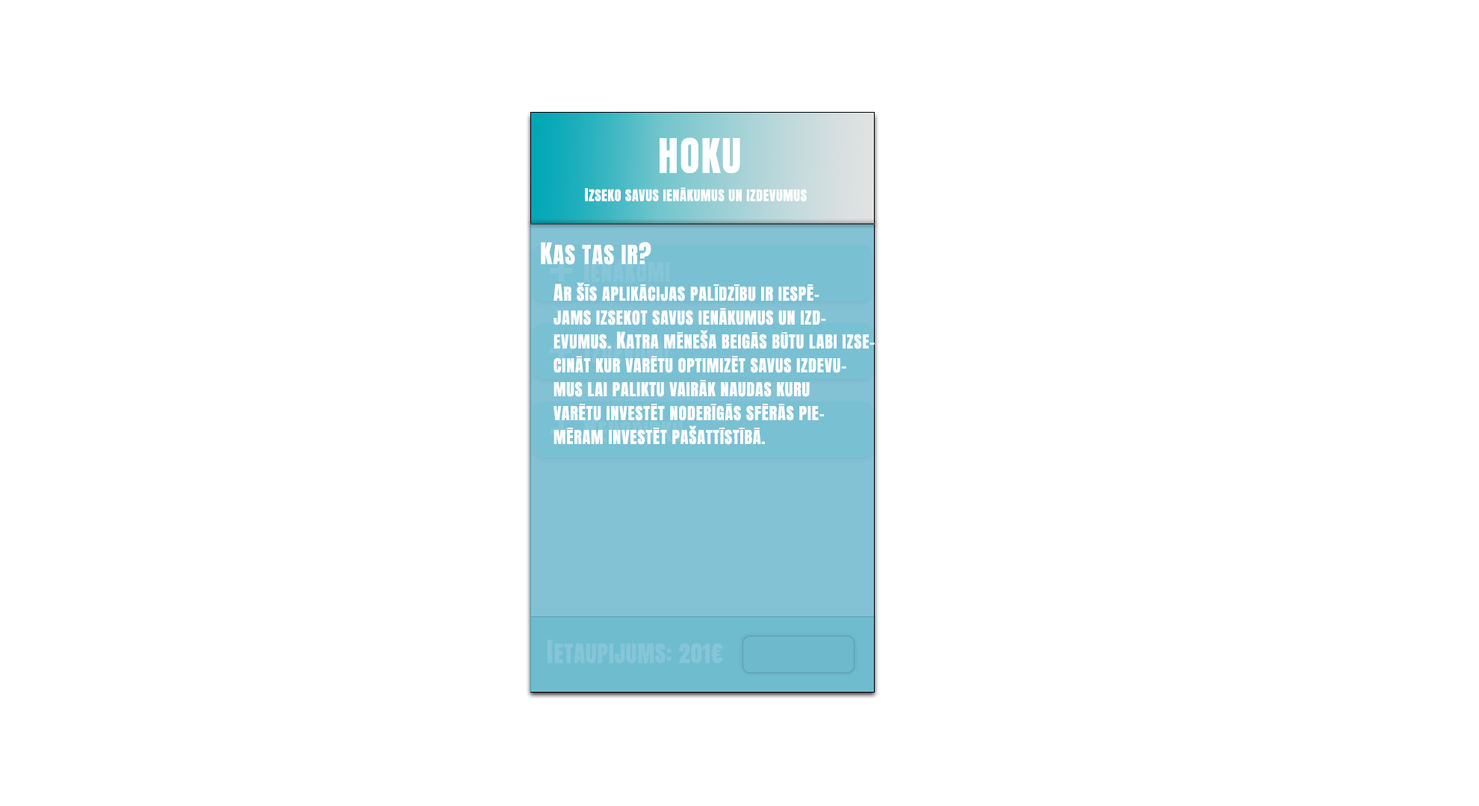
<style>
.page{position:relative;width:1479px;height:806px;background:#ffffff}
.page>*{position:absolute;margin:0}
.t1{font:40.3px "Anton-Regular";letter-spacing:0.04em;color:#ffffff;text-transform:uppercase}
.t2{font:13.4px "Anton-Regular";letter-spacing:0.04em;color:#ffffff;text-transform:uppercase}
.t3{font:14.9px "Anton-Regular";letter-spacing:0.04em;color:#ffffff;text-transform:uppercase}
.t4{font:22.4px "Anton-Regular";letter-spacing:0.04em;color:#ffffff;text-transform:uppercase}
.t5{font:25.4px "Anton-Regular";letter-spacing:0.04em;color:#ffffff;text-transform:uppercase}
.t6{font:16.4px/11.9px "Anton-Regular";letter-spacing:0.04em;color:#ffffff;text-transform:uppercase}
.t7{font:19.4px/11.9px "Anton-Regular";letter-spacing:0.04em;color:#ffffff;text-transform:uppercase}
.t8{font:22.4px "Anton-Regular";letter-spacing:0.04em;color:#86c5d8;text-transform:uppercase}
.t9{font:26.9px "Anton-Regular";letter-spacing:0.04em;color:#86c5d8;text-transform:uppercase}
</style>
<div class="page">
<p class="t1" style="left:659px;top:137px;width:81px;height:36px">HOKU</p>
<p class="t2" style="left:585px;top:187px;width:221px;height:15px"><span class="t3">i</span>ZSEKO SAVUS IENĀKUMUS un Izdevumus</p>
<p class="t4" style="left:541px;top:242px;width:110px;height:23px"><span class="t5">K</span>as tas ir<span class="t5">?</span></p>
<p class="t6" style="left:553px;top:282px;width:321px;height:163px"><span class="t7">A</span>R ŠĪS APLIKĀCIJAS PALĪDZĪBU IR IESPĒ-<br><br>JAMS IZSEKOT SAVUS IENĀKUMUS UN IZD-<br><br>EVUMUS. <span class="t7">k</span>Atra mēneša beigās būtu labi izse-<br><br>cināt kur varētu optimizēt savus izdevu-<br><br>mus lai paliktu vairāk naudas kuru<br><br>varētu investēt noderīgās sfērās pie-<br><br>mēram investēt pašattīstībā.</p>
<p class="t8" style="left:547px;top:640px;width:176px;height:24px"><span class="t9">I</span>etaupijums: 201€</p>
</div>
